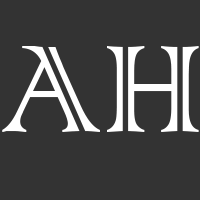
<style>
.page{position:relative;width:200px;height:200px;background:#333333}
.page>*{position:absolute;margin:0}
.t1{font:164.2px "ColonnaMT";color:#ffffff;scale:0.91 1}
</style>
<div class="page">
<p class="t1" style="left:2px;top:46px;width:197px;height:86px">AH</p>
</div>
